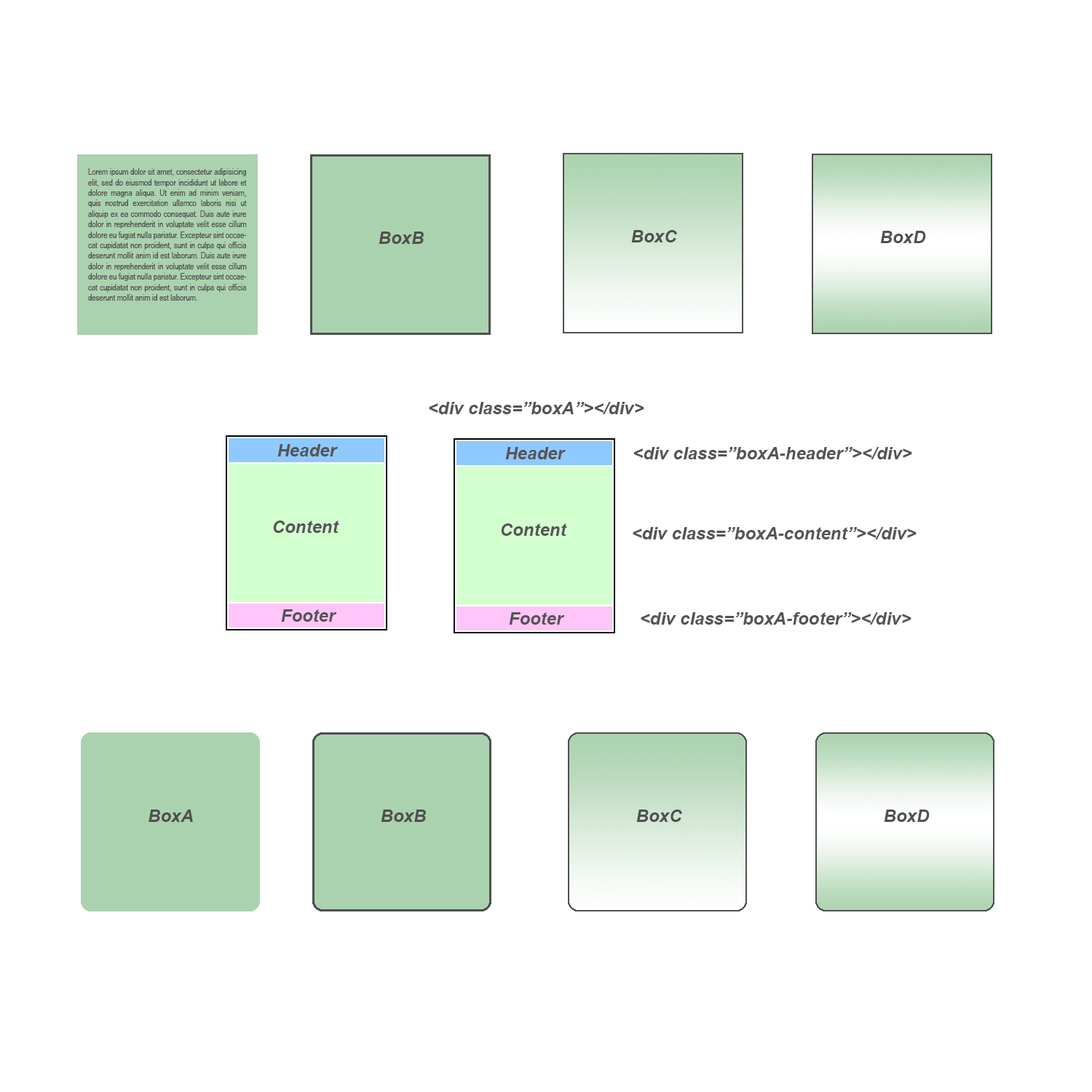
<style>
.page{position:relative;width:1092px;height:1092px;background:#ffffff}
.page>*{position:absolute;margin:0}
.t1{font:8.7px "ArialNarrow";color:#4f4f4f;scale:0.97 1}
.t2{font:17.5px "Arial-BoldItalicMT";color:#4f4f4f}
.t3{font:17.5px "Arial-BoldItalicMT";color:#545454}
</style>
<div class="page">
<p class="t1" style="left:88px;top:168px;width:159px;height:133px;text-align:justify">Lorem ipsum dolor sit amet, consectetur adipisicing elit, sed do eiusmod tempor incididunt ut labore et dolore magna aliqua. Ut enim ad minim veniam, quis nostrud exercitation ullamco laboris nisi ut aliquip ex ea commodo consequat. Duis aute irure dolor in reprehenderit in voluptate velit esse cillum dolore eu fugiat nulla pariatur. Excepteur sint occaecat cupidatat non proident, sunt in culpa qui officia deserunt mollit anim id est laborum. Duis aute irure dolor in reprehenderit in voluptate velit esse cillum dolore eu fugiat nulla pariatur. Excepteur sint occaecat cupidatat non proident, sunt in culpa qui officia deserunt mollit anim id est laborum.</p>
<p class="t2" style="left:379px;top:232px;width:45px;height:12px">BoxB</p>
<p class="t2" style="left:631px;top:230px;width:46px;height:12px">BoxC</p>
<p class="t2" style="left:880px;top:231px;width:46px;height:12px">BoxD</p>
<p class="t3" style="left:429px;top:402px;width:215px;height:12px">&lt;div class=”boxA”&gt;&lt;/div&gt;</p>
<p class="t3" style="left:277px;top:444px;width:61px;height:12px">Header</p>
<p class="t3" style="left:505px;top:447px;width:61px;height:12px">Header</p>
<p class="t3" style="left:634px;top:447px;width:278px;height:12px">&lt;div class=”boxA-header”&gt;&lt;/div&gt;</p>
<p class="t3" style="left:273px;top:521px;width:66px;height:12px">Content</p>
<p class="t3" style="left:501px;top:523px;width:66px;height:13px">Content</p>
<p class="t3" style="left:633px;top:527px;width:284px;height:12px">&lt;div class=”boxA-content”&gt;&lt;/div&gt;</p>
<p class="t3" style="left:281px;top:609px;width:56px;height:13px">Footer</p>
<p class="t3" style="left:509px;top:612px;width:56px;height:13px">Footer</p>
<p class="t3" style="left:641px;top:612px;width:270px;height:13px">&lt;div class=”boxA-footer”&gt;&lt;/div&gt;</p>
<p class="t2" style="left:149px;top:810px;width:44px;height:12px">BoxA</p>
<p class="t2" style="left:381px;top:810px;width:45px;height:12px">BoxB</p>
<p class="t2" style="left:636px;top:810px;width:46px;height:12px">BoxC</p>
<p class="t2" style="left:884px;top:810px;width:46px;height:12px">BoxD</p>
</div>
